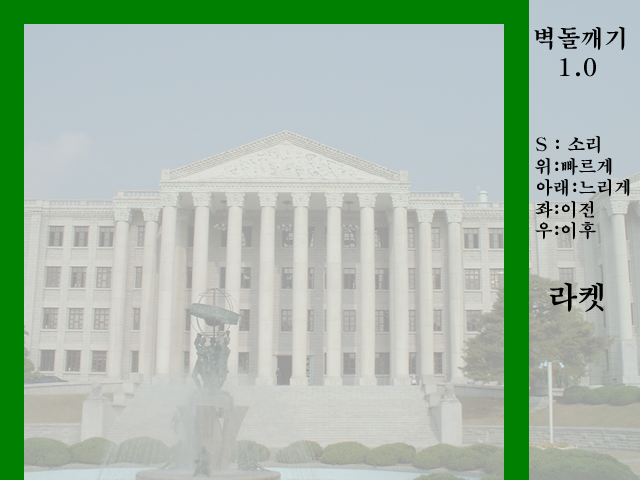
<style>
.page{position:relative;width:640px;height:480px}
.page>*{position:absolute;margin:0}
.t1{font:24px "H2mjrE";color:#000000}
.t2{font:18px "H2mjrE";color:#000000}
.t3{font:30px "H2mjrE";color:#000000}
</style>
<div class="page">
<p class="t1" style="left:534px;top:26px;width:91px;height:51px">벽돌깨기<br>   1.0</p>
<p class="t2" style="left:535px;top:135px;width:95px;height:105px">S : 소리<br>위:빠르게<br>아래:느리게<br>좌:이전<br>우:이후</p>
<p class="t3" style="left:549px;top:282px;width:55px;height:30px">라켓</p>
</div>
